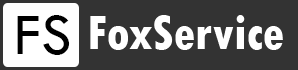
<style>
.page{position:relative;width:298px;height:70px;background:#333333}
.page>*{position:absolute;margin:0}
.t1{font:61.1px "TwCenMT-Regular";color:#000000}
.t2{font:50px "TwCenMT-CondensedExtraBold";color:#ffffff}
</style>
<div class="page">
<p class="t1" style="left:17px;top:15px;width:53px;height:40px">FS</p>
<p class="t2" style="left:90px;top:15px;width:193px;height:35px">FoxService</p>
</div>
